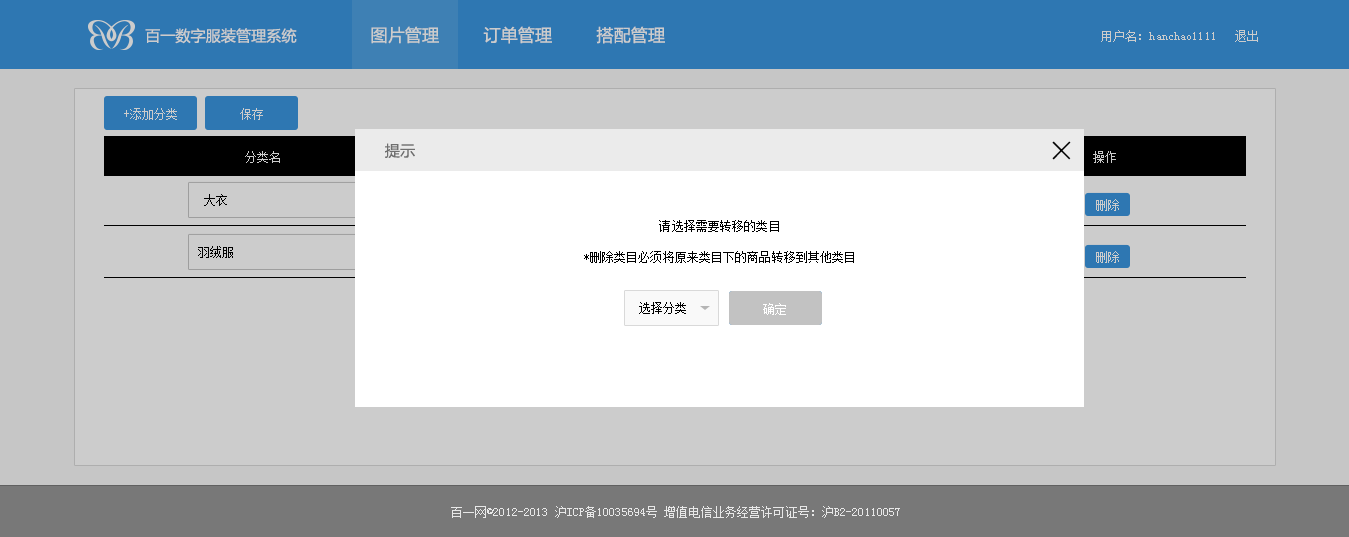
<style>
.page{position:relative;width:1349px;height:537px;background:#cccccc}
.page>*{position:absolute;margin:0}
.t1{font:15px "MicrosoftYaHei";letter-spacing:0.01em;color:#cccccc}
.t2{font:17px "MicrosoftYaHei";letter-spacing:0.01em;color:#cccccc}
.t3{font:12px "SimSun";letter-spacing:0.01em;color:#cccccc}
.t4{font:15px "MicrosoftYaHei";letter-spacing:0.01em;color:#6f6f6f}
.t5{font:30px "STXihei";letter-spacing:0.01em;color:#000000}
.t6{font:12px "SimSun";letter-spacing:0.01em;color:#cbcbcb}
.t7{font:12px "SimSun";letter-spacing:0.01em;color:#010101}
.t8{font:12px "SimSun";letter-spacing:0.01em;color:#000000}
.t9{font:12px "SimSun";letter-spacing:0.01em;color:#ffffff}
.t10{font:12px "SimSun";letter-spacing:0.01em;color:#e8e8e8}
</style>
<div class="page">
<p class="t1" style="left:145px;top:28px;width:152px;height:16px">百一数字服装管理系统</p>
<p class="t2" style="left:371px;top:26px;width:68px;height:18px">图片管理</p>
<p class="t2" style="left:483px;top:26px;width:69px;height:18px">订单管理</p>
<p class="t2" style="left:596px;top:26px;width:69px;height:18px">搭配管理</p>
<p class="t3" style="left:1101px;top:30px;width:114px;height:12px">用户名：hanchao1111</p>
<p class="t3" style="left:1235px;top:30px;width:23px;height:12px">退出</p>
<p class="t3" style="left:124px;top:108px;width:53px;height:12px">+添加分类</p>
<p class="t3" style="left:240px;top:108px;width:23px;height:12px">保存</p>
<p class="t4" style="left:385px;top:143px;width:30px;height:15px">提示</p>
<p class="t5" style="left:1052px;top:141px;width:19px;height:19px">×</p>
<p class="t3" style="left:245px;top:151px;width:35px;height:12px">分类名</p>
<p class="t6" style="left:1093px;top:151px;width:23px;height:12px">操作</p>
<p class="t7" style="left:204px;top:194px;width:23px;height:12px">大衣</p>
<p class="t3" style="left:1096px;top:199px;width:23px;height:12px">删除</p>
<p class="t8" style="left:659px;top:220px;width:120px;height:12px">请选择需要转移的类目</p>
<p class="t7" style="left:198px;top:246px;width:35px;height:12px">羽绒服</p>
<p class="t8" style="left:584px;top:251px;width:270px;height:12px">*删除类目必须将原来类目下的商品转移到其他类目</p>
<p class="t3" style="left:1096px;top:251px;width:23px;height:12px">删除</p>
<p class="t8" style="left:639px;top:302px;width:47px;height:12px">选择分类</p>
<p class="t9" style="left:763px;top:303px;width:23px;height:12px">确定</p>
<p class="t10" style="left:451px;top:506px;width:449px;height:12px">百一网©2012-2013 沪ICP备10035694号 增值电信业务经营许可证号：沪B2-20110057</p>
</div>
